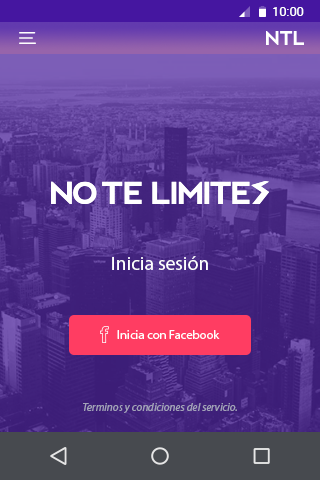
<style>
.page{position:relative;width:320px;height:480px}
.page>*{position:absolute;margin:0}
.t1{font:12.5px "Roboto-Regular";color:#ffffff}
.t2{font:19.4px "MyriadPro-Regular";color:#ffffff}
.t3{font:12.5px "MyriadPro-Regular";color:#ffffff}
.t4{font:11.1px "MyriadPro-It";color:#a2a1b8}
</style>
<div class="page">
<p class="t1" style="left:273px;top:7px;width:31px;height:9px">10:00</p>
<p class="t2" style="left:112px;top:256px;width:96px;height:14px">Inicia sesión</p>
<p class="t3" style="left:117px;top:330px;width:103px;height:9px">Inicia con Facebook</p>
<p class="t4" style="left:83px;top:403px;width:154px;height:10px">Terminos y condiciones del servicio.</p>
</div>
